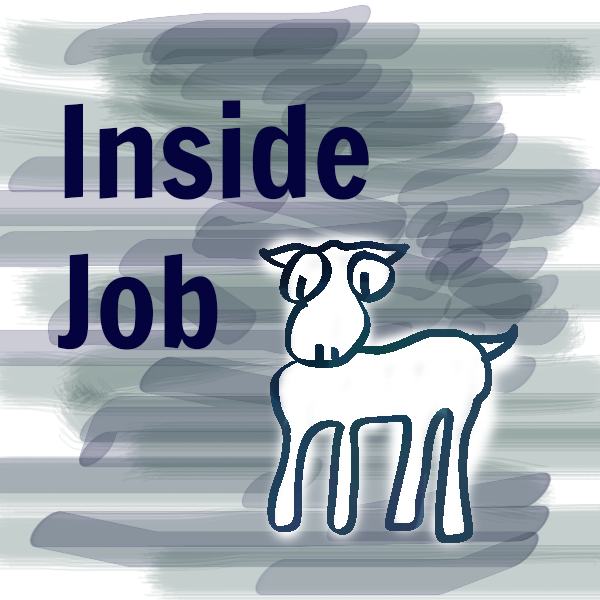
<style>
.page{position:relative;width:600px;height:600px}
.page>*{position:absolute;margin:0}
.t1{font:125px "FrancoisOne-Regular";color:#04033d}
</style>
<div class="page">
<p class="t1" style="left:58px;top:100px;width:311px;height:250px">Inside<br>Job</p>
</div>
